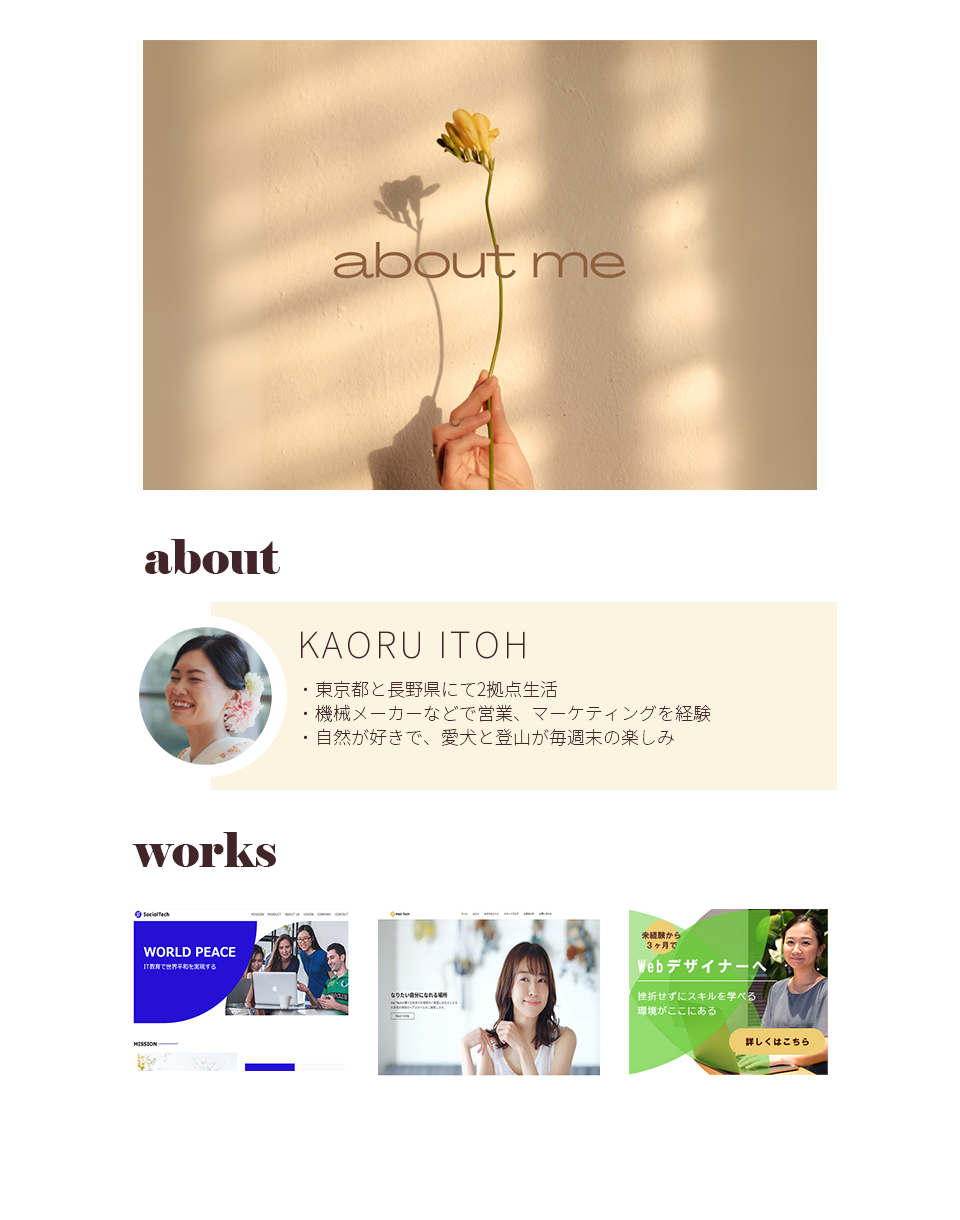
<style>
.page{position:relative;width:960px;height:1220px;background:#ffffff}
.page>*{position:absolute;margin:0}
.t1{font:48px "Elephant-Regular";color:#412528}
.t2{font:36px "NotoSansJP-Thin";letter-spacing:0.08em;color:#412528}
.t3{font:18px/24px "NotoSansJP-Thin";color:#412528}
</style>
<div class="page">
<p class="t1" style="left:145px;top:539px;width:135px;height:35px">about</p>
<p class="t2" style="left:301px;top:631px;width:224px;height:28px">KAORU ITOH</p>
<p class="t3" style="left:303px;top:680px;width:408px;height:66px">・東京都と長野県にて2拠点生活<br>・機械メーカーなどで営業、マーケティングを経験<br>・自然が好きで、愛犬と登山が毎週末の楽しみ</p>
<p class="t1" style="left:132px;top:832px;width:144px;height:35px">works</p>
</div>
